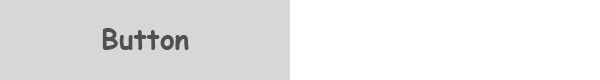
<style>
.page{position:relative;width:600px;height:80px;background:#ffffff}
.page>*{position:absolute;margin:0}
.t1{font:28px "ComicSansMS-Bold";color:#505050}
</style>
<div class="page">
<p class="t1" style="left:102px;top:28px;width:87px;height:22px">Button</p>
</div>
